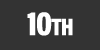
<style>
.page{position:relative;width:100px;height:50px;background:#333333}
.page>*{position:absolute;margin:0}
.t1{font:34.2px "AcuminConcept-CondensedBlack";letter-spacing:-0.03em;color:#ffffff}
.t2{font:24.1px "AcuminConcept-CondensedBlack";letter-spacing:-0.03em;color:#ffffff}
</style>
<div class="page">
<p class="t1" style="left:27px;top:12px;width:46px;height:24px">10<span class="t2">TH</span></p>
</div>
